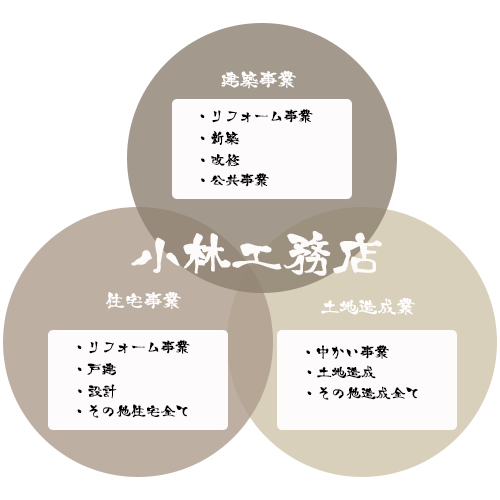
<style>
.page{position:relative;width:500px;height:500px;background:#ffffff}
.page>*{position:absolute;margin:0}
.t1{font:18px "g_brushtappitsu_free_bold";letter-spacing:0.025em;color:#ffffff;font-weight:bold}
.t2{font:14px "g_brushtappitsu_free_bold";letter-spacing:0.025em;color:#000000;font-weight:bold}
.t3{font:48px "g_brushtappitsu_free_bold";letter-spacing:0.025em;color:#fdfafa;font-weight:bold}
</style>
<div class="page">
<p class="t1" style="left:221px;top:70px;width:75px;height:19px">建築事業</p>
<p class="t2" style="left:200px;top:109px;width:113px;height:14px">・リフォーム事業</p>
<p class="t2" style="left:200px;top:131px;width:40px;height:14px">・新築</p>
<p class="t2" style="left:201px;top:153px;width:39px;height:14px">・改修</p>
<p class="t2" style="left:201px;top:173px;width:68px;height:14px">・公共事業</p>
<p class="t3" style="left:131px;top:231px;width:251px;height:45px">小林工務店</p>
<p class="t1" style="left:106px;top:291px;width:75px;height:18px">住宅事業</p>
<p class="t1" style="left:321px;top:297px;width:94px;height:18px">土地造成業</p>
<p class="t2" style="left:77px;top:340px;width:113px;height:14px">・リフォーム事業</p>
<p class="t2" style="left:306px;top:345px;width:83px;height:14px">・中かい事業</p>
<p class="t2" style="left:77px;top:363px;width:39px;height:13px">・戸建</p>
<p class="t2" style="left:307px;top:365px;width:69px;height:14px">・土地造成</p>
<p class="t2" style="left:78px;top:384px;width:39px;height:15px">・設計</p>
<p class="t2" style="left:307px;top:386px;width:111px;height:14px">・その他造成全て</p>
<p class="t2" style="left:77px;top:404px;width:111px;height:14px">・その他住宅全て</p>
</div>
